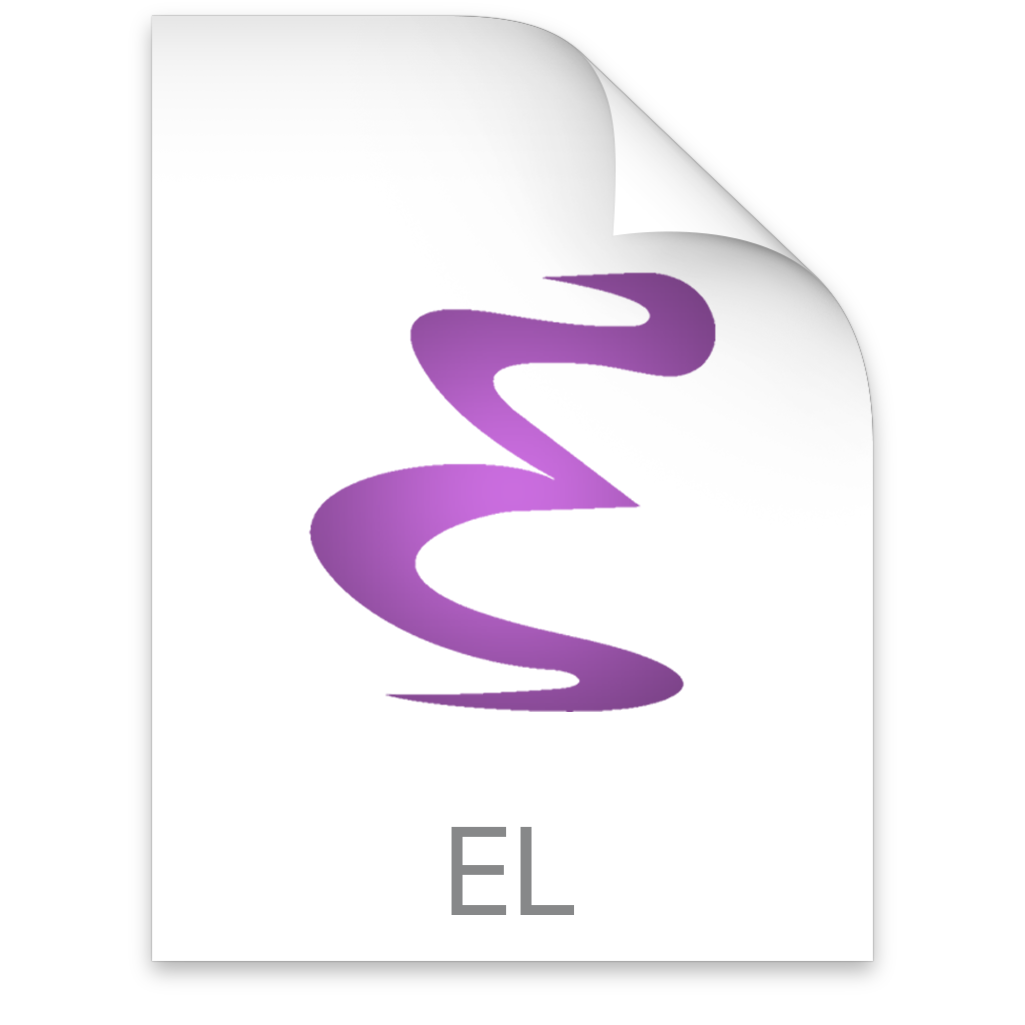
<style>
.page{position:relative;width:1025px;height:1025px;background:#ffffff}
.page>*{position:absolute;margin:0}
.t1{font:125px "SFProDisplay-Regular";color:#878889}
</style>
<div class="page">
<p class="t1" style="left:451px;top:826px;width:124px;height:89px">EL</p>
</div>
